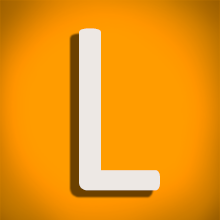
<style>
.page{position:relative;width:220px;height:220px;background:#ff9c00}
.page>*{position:absolute;margin:0}
.t1{font:252.1px "Calibri";color:#ececec;font-weight:bold;scale:0.96 1}
</style>
<div class="page">
<p class="t1" style="left:79px;top:28px;width:81px;height:163px">L</p>
</div>
